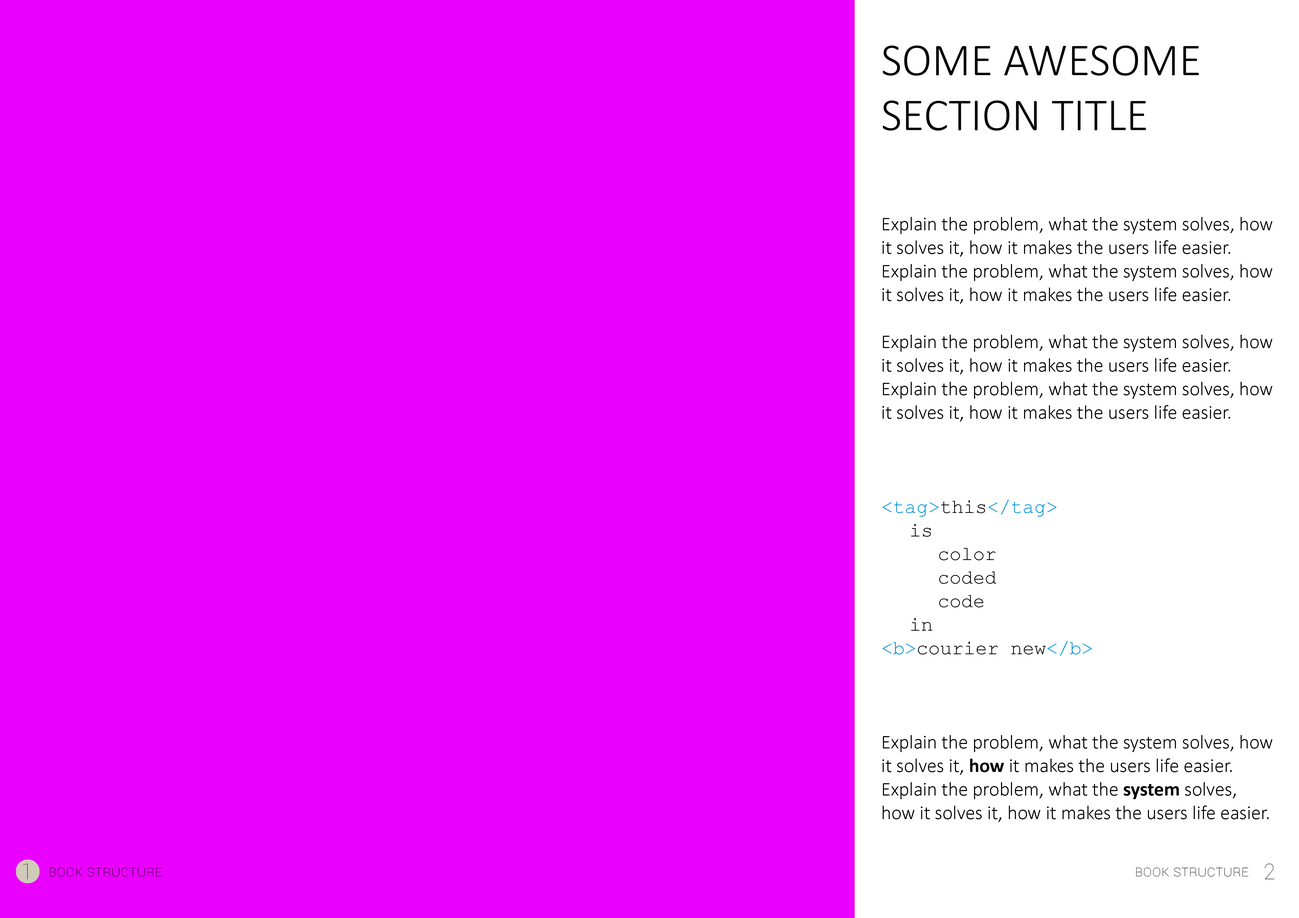
<style>
.page{position:relative;width:1299px;height:918px;background:#ea00ff}
.page>*{position:absolute;margin:0}
.t1{font:45.8px "Calibri-Light";color:#000000;text-transform:uppercase}
.t2{font:19.6px "Calibri-Light";color:#000000}
.t3{font:19.6px "CourierNewPSMT";color:#0090d3}
.t4{font:19.6px "CourierNewPSMT";color:#000000}
.t5{font:19.6px "CourierNewPSMT";color:#008fd2}
.t6{font:19.6px "Calibri-Bold";color:#000000}
.t7{font:21.8px "Roboto-Thin";color:#484848}
.t8{font:15.3px "Roboto-Thin";color:#000000;font-variant:small-caps}
</style>
<div class="page">
<p class="t1" style="left:882px;top:46px;width:317px;height:85px">some awesome section title</p>
<p class="t2" style="left:882px;top:217px;width:390px;height:605px">Explain the problem, what the system solves, how it solves it, how it makes the users life easier. Explain the problem, what the system solves, how it solves it, how it makes the users life easier.<br><br>Explain the problem, what the system solves, how it solves it, how it makes the users life easier. Explain the problem, what the system solves, how it solves it, how it makes the users life easier.<br><br><br><br><span class="t3">&lt;tag&gt;</span><span class="t4">this</span><span class="t3">&lt;/tag&gt;<br></span><span class="t4">   is<br>      color<br>      coded<br>      code<br>   in<br></span><span class="t5">&lt;b&gt;</span><span class="t4">courier new</span><span class="t3">&lt;/b&gt;<br></span><br><br><br>Explain the problem, what the system solves, how it solves it, <span class="t6">how </span>it makes the users life easier. Explain the problem, what the <span class="t6">system </span>solves, how it solves it, how it makes the users life easier.</p>
<p class="t7" style="left:23px;top:864px;width:5px;height:16px">1</p>
<p class="t8" style="left:50px;top:868px;width:112px;height:9px">Book structure</p>
<p class="t8" style="left:1136px;top:868px;width:112px;height:9px">Book structure</p>
<p class="t7" style="left:1264px;top:864px;width:10px;height:16px">2</p>
</div>
